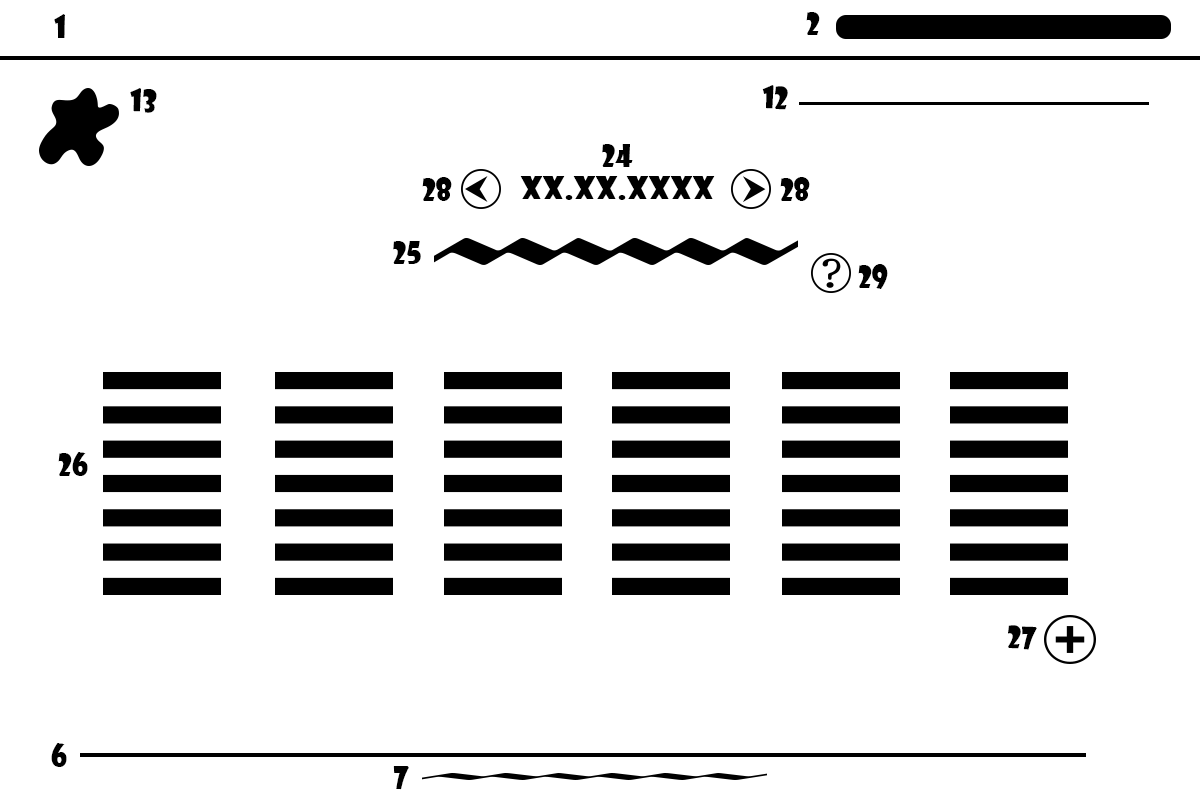
<style>
.page{position:relative;width:1200px;height:800px;background:#ffffff}
.page>*{position:absolute;margin:0}
.t1{font:30px "ShowcardGothic-Reg";color:#000000}
</style>
<div class="page">
<p class="t1" style="left:54px;top:14px;width:11px;height:24px">1</p>
<p class="t1" style="left:806px;top:12px;width:14px;height:23px">2</p>
<p class="t1" style="left:130px;top:88px;width:27px;height:25px;rotate:2deg">13</p>
<p class="t1" style="left:762px;top:85px;width:26px;height:25px;rotate:2deg">12</p>
<p class="t1" style="left:602px;top:144px;width:31px;height:23px">24</p>
<p class="t1" style="left:422px;top:177px;width:30px;height:24px">28</p>
<p class="t1" style="left:520px;top:176px;width:195px;height:24px">xx.xx.xxxx</p>
<p class="t1" style="left:780px;top:177px;width:30px;height:24px">28</p>
<p class="t1" style="left:393px;top:241px;width:28px;height:23px">25</p>
<p class="t1" style="left:858px;top:264px;width:30px;height:25px">29</p>
<p class="t1" style="left:58px;top:452px;width:30px;height:24px">26</p>
<p class="t1" style="left:1008px;top:625px;width:29px;height:25px;rotate:2deg">27</p>
<p class="t1" style="left:51px;top:743px;width:16px;height:24px">6</p>
<p class="t1" style="left:393px;top:766px;width:16px;height:24px">7</p>
</div>
